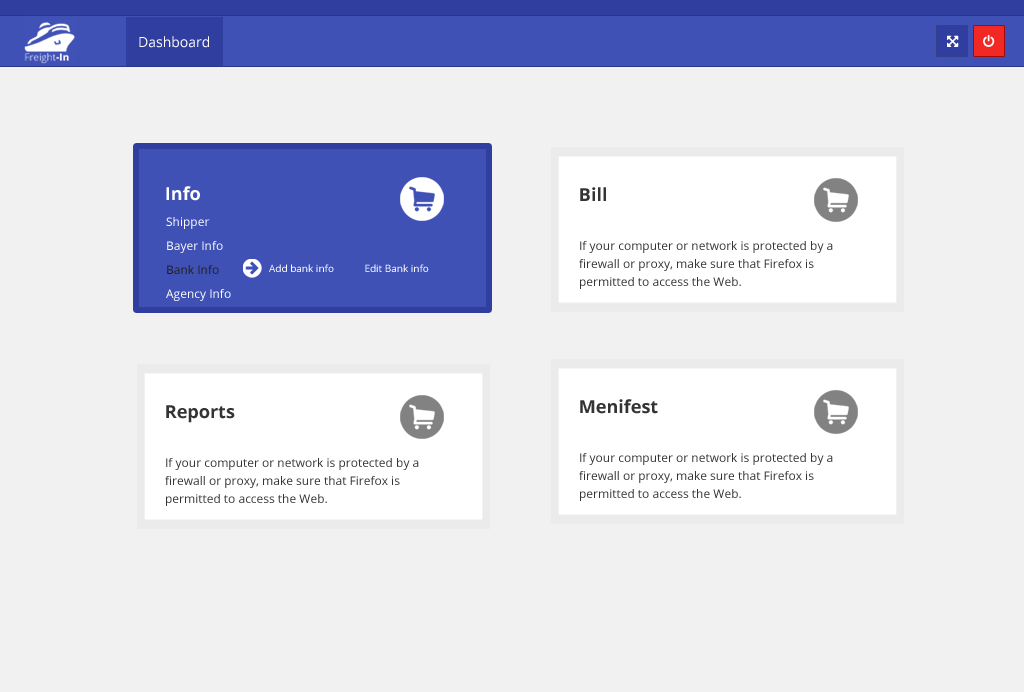
<style>
.page{position:relative;width:1024px;height:692px;background:#f1f1f1}
.page>*{position:absolute;margin:0}
.t1{font:14px "OpenSans";color:#ffffff}
.t2{font:18px "OpenSans-Bold";color:#fffefe}
.t3{font:18px "OpenSans-Bold";color:#343434}
.t4{font:12px/24px "OpenSans";color:#fffefe}
.t5{font:12px/24px "OpenSans";color:#1f1f1f}
.t6{font:12px/24px "OpenSans";color:#ffffff}
.t7{font:12px/18px "OpenSans";color:#343434}
.t8{font:10px "OpenSans";color:#ffffff}
</style>
<div class="page">
<p class="t1" style="left:139px;top:36px;width:70px;height:12px">Dashboard</p>
<p class="t2" style="left:166px;top:186px;width:34px;height:15px">Info</p>
<p class="t3" style="left:580px;top:187px;width:26px;height:14px">Bill</p>
<p class="t4" style="left:166px;top:217px;width:65px;height:84px">Shipper<br>Bayer Info<br><span class="t5">Bank Info<br></span><span class="t6">Agency Info</span></p>
<p class="t7" style="left:579px;top:241px;width:254px;height:48px">If your computer or network is protected by a firewall or proxy, make sure that Firefox is permitted to access the Web.</p>
<p class="t8" style="left:269px;top:264px;width:160px;height:8px">Add bank info          Edit Bank info</p>
<p class="t3" style="left:580px;top:399px;width:78px;height:15px">Menifest</p>
<p class="t3" style="left:166px;top:405px;width:69px;height:18px">Reports</p>
<p class="t7" style="left:165px;top:458px;width:254px;height:48px">If your computer or network is protected by a firewall or proxy, make sure that Firefox is permitted to access the Web.</p>
<p class="t7" style="left:579px;top:453px;width:254px;height:48px">If your computer or network is protected by a firewall or proxy, make sure that Firefox is permitted to access the Web.</p>
</div>
